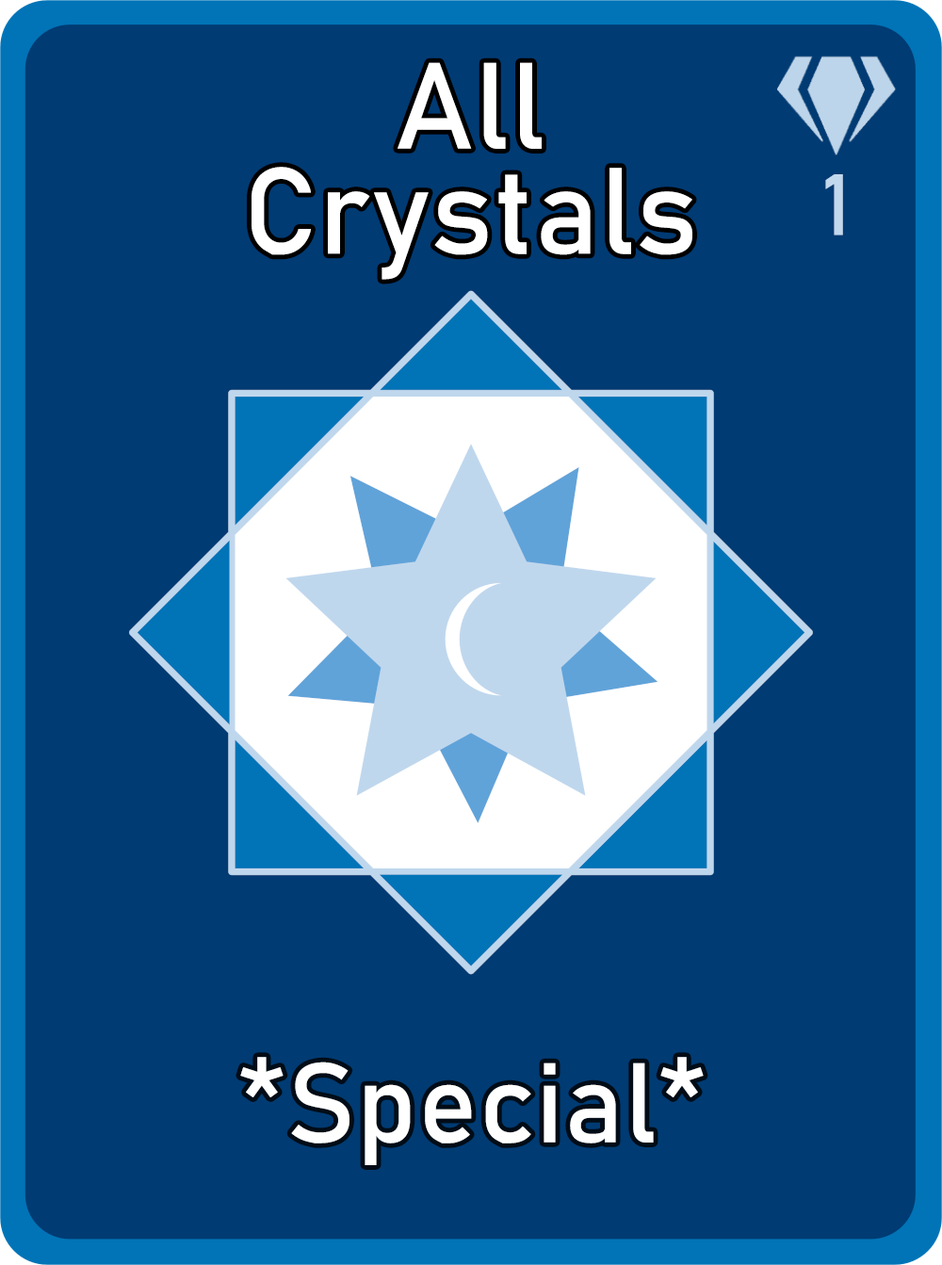
<style>
.page{position:relative;width:942px;height:1265px;background:#003b73}
.page>*{position:absolute;margin:0}
.t1{font:120.6px/105.1px "Bahnschrift";letter-spacing:0.01em;color:#ffffff}
.t2{font:85px "Bahnschrift";letter-spacing:0.01em;color:#c1d8ed}
.t3{font:111.3px "Bahnschrift";letter-spacing:0.01em;color:#ffffff}
</style>
<div class="page">
<p class="t1" style="left:252px;top:62px;width:441px;height:218px;text-align:center">All<br>Crystals</p>
<p class="t2" style="left:825px;top:174px;width:18px;height:62px">1</p>
<p class="t3" style="left:240px;top:1057px;width:464px;height:109px">*Special*</p>
</div>
